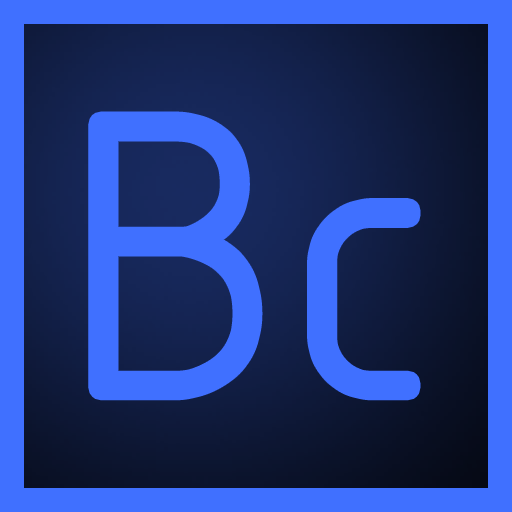
<style>
.page{position:relative;width:512px;height:512px;background:#4070ff}
.page>*{position:absolute;margin:0}
.t1{font:400px "GENISO";color:#4070ff}
</style>
<div class="page">
<p class="t1" style="left:100px;top:123px;width:309px;height:266px">Bc</p>
</div>
